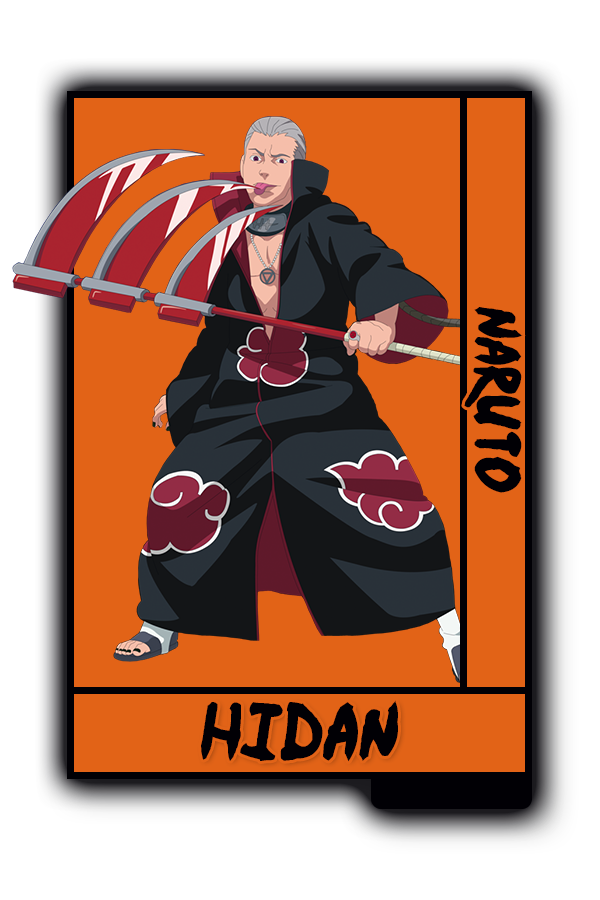
<style>
.page{position:relative;width:600px;height:900px;background:#e26317}
.page>*{position:absolute;margin:0}
.t1{font:52px "Ninja-Naruto";color:#010005}
.t2{font:65.2px "Ninja-Naruto";color:#010005}
</style>
<div class="page">
<p class="t1" style="left:464px;top:307px;width:59px;height:186px;rotate:90deg">Naruto</p>
<p class="t2" style="left:201px;top:700px;width:197px;height:62px">Hidan</p>
</div>
